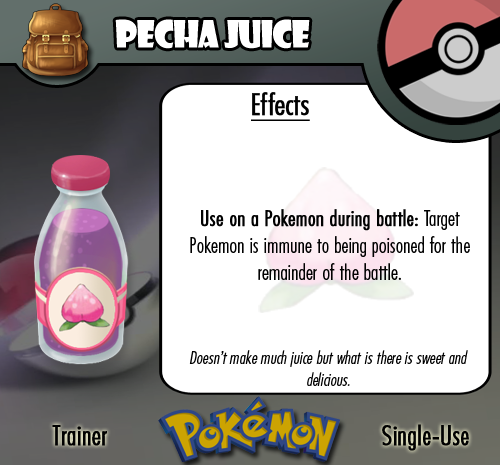
<style>
.page{position:relative;width:500px;height:465px;background:#ffffff}
.page>*{position:absolute;margin:0}
.t1{font:36.7px "ShowcardGothic-Reg";letter-spacing:-0.025em;color:#ffffff;scale:0.91 1}
.t2{font:22.2px "FuturaCondensedBQ-Light";color:#010101}
.t3{font:27.8px "FuturaCondensedBQ-Light";color:#010101;font-weight:bold}
.t4{font:30.6px "FuturaCondensedBQ-Light";color:#010101;font-weight:bold;text-decoration:underline}
.t5{font:22.2px "FuturaCondensedBQ-Light";color:#010101;font-weight:bold}
.t6{font:18.1px "FuturaCondensedBQ-Light";color:#010101;font-style:italic}
</style>
<div class="page">
<p class="t1" style="left:115px;top:19px;width:195px;height:30px">Pecha Juice</p>
<p class="t2" style="left:190px;top:92px;width:280px;height:188px"><span class="t3">  </span><span class="t4">Effects<br><br><br><br><br><br></span><span class="t5">Use on a Pokemon during battle:</span> Target Pokemon is immune to being poisoned for the remainder of the battle.</p>
<p class="t6" style="left:189px;top:350px;width:279px;height:36px;text-align:center">Doesn’t make much juice but what is there is sweet and delicious.</p>
<p class="t3" style="left:52px;top:425px;width:55px;height:21px">Trainer</p>
<p class="t3" style="left:382px;top:424px;width:87px;height:27px">Single-Use</p>
</div>
